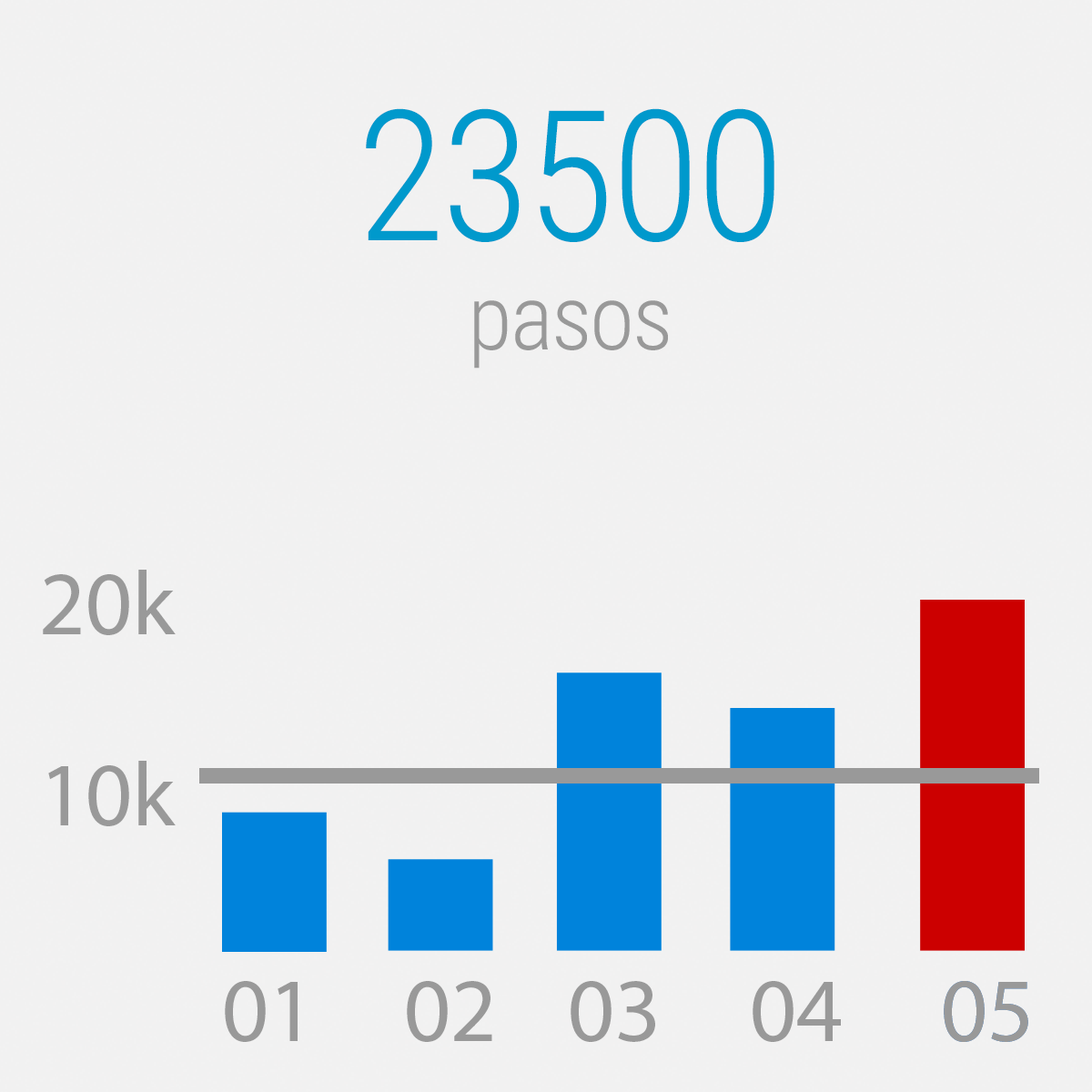
<style>
.page{position:relative;width:1092px;height:1092px;background:#f1f1f1}
.page>*{position:absolute;margin:0}
.t1{font:182px/191.7px "RobotoCondensed-Light";letter-spacing:-0.02em;color:#0099cc}
.t2{font:91px "RobotoCondensed-Light";letter-spacing:-0.02em;color:#999999}
.t3{font:91px "MyriadPro-Regular";color:#999999}
</style>
<div class="page">
<p class="t1" style="left:366px;top:108px;width:408px;height:261px;text-align:center">23500<br><span class="t2">pasos</span></p>
<p class="t3" style="left:43px;top:570px;width:133px;height:65px">20k</p>
<p class="t3" style="left:48px;top:761px;width:128px;height:65px">10k</p>
<p class="t3" style="left:225px;top:981px;width:73px;height:61px">01</p>
<p class="t3" style="left:407px;top:981px;width:85px;height:61px">02</p>
<p class="t3" style="left:571px;top:981px;width:84px;height:61px">03</p>
<p class="t3" style="left:753px;top:981px;width:88px;height:61px">04</p>
<p class="t3" style="left:944px;top:981px;width:84px;height:61px">05</p>
<p class="t3" style="left:944px;top:981px;width:84px;height:61px">05</p>
</div>
